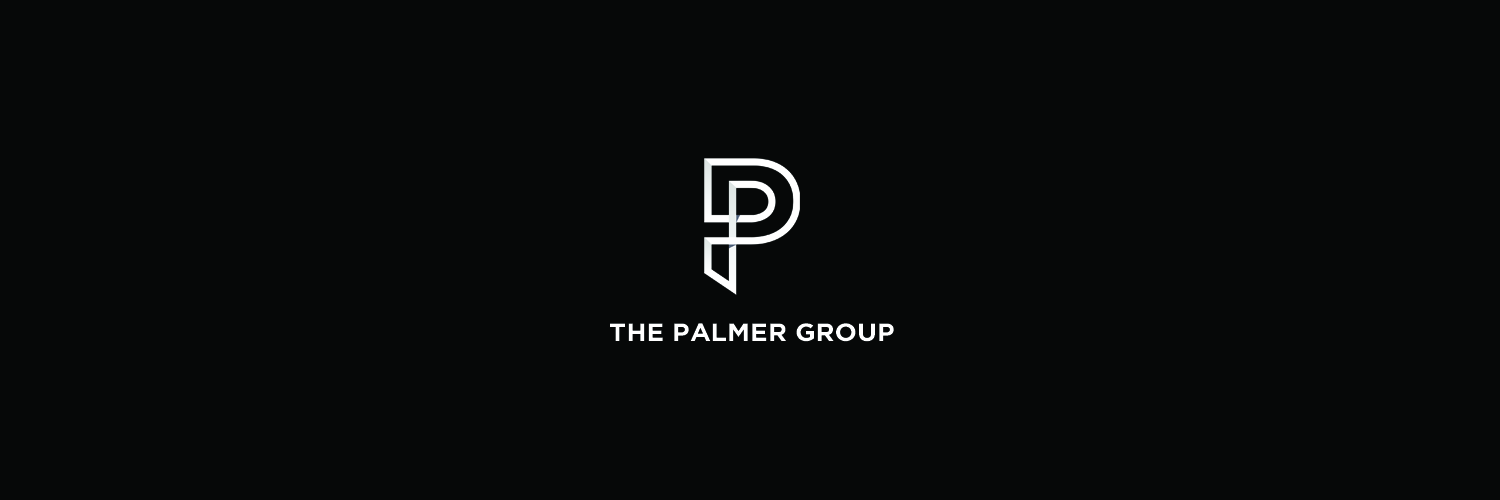
<style>
.page{position:relative;width:1500px;height:500px;background:#060808}
.page>*{position:absolute;margin:0}
.t1{font:25.1px "GothamBold";color:#ffffff;scale:1.06 1}
</style>
<div class="page">
<p class="t1" style="left:610px;top:323px;width:284px;height:19px">THE PALMER GROUP</p>
</div>
